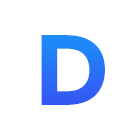
<style>
.page{position:relative;width:140px;height:140px;background:#ffffff}
.page>*{position:absolute;margin:0}
.t1{font:100px "Montserrat-Bold"}
</style>
<div class="page">
<p class="t1" style="left:41px;top:35px;width:64px;height:70px">D</p>
</div>
